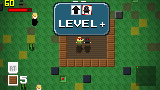
<style>
.page{position:relative;width:160px;height:90px}
.page>*{position:absolute;margin:0}
.t1{font:8px "MegaMan-2";color:#ffffff}
.t2{font:8px "MyriadPro-Regular";color:#ffffff}
</style>
<div class="page">
<p class="t1" style="left:59px;top:20px;width:46px;height:7px">Level<span class="t2"> +</span></p>
</div>
